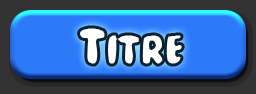
<style>
.page{position:relative;width:256px;height:94px;background:#2c7af7}
.page>*{position:absolute;margin:0}
.t1{font:41px "BubbleGum";letter-spacing:-0.035em;color:#ffffff}
.t2{font:49.1px "BubbleGum";letter-spacing:-0.035em;color:#ffffff}
</style>
<div class="page">
<p class="t1" style="left:78px;top:27px;width:106px;height:38px"><span class="t2">T</span>itre</p>
</div>
